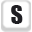
<style>
.page{position:relative;width:32px;height:32px;background:#ffffff}
.page>*{position:absolute;margin:0}
.t1{font:24px "Impact";color:#1f1e23}
</style>
<div class="page">
<p class="t1" style="left:11px;top:5px;width:12px;height:19px">S</p>
</div>
